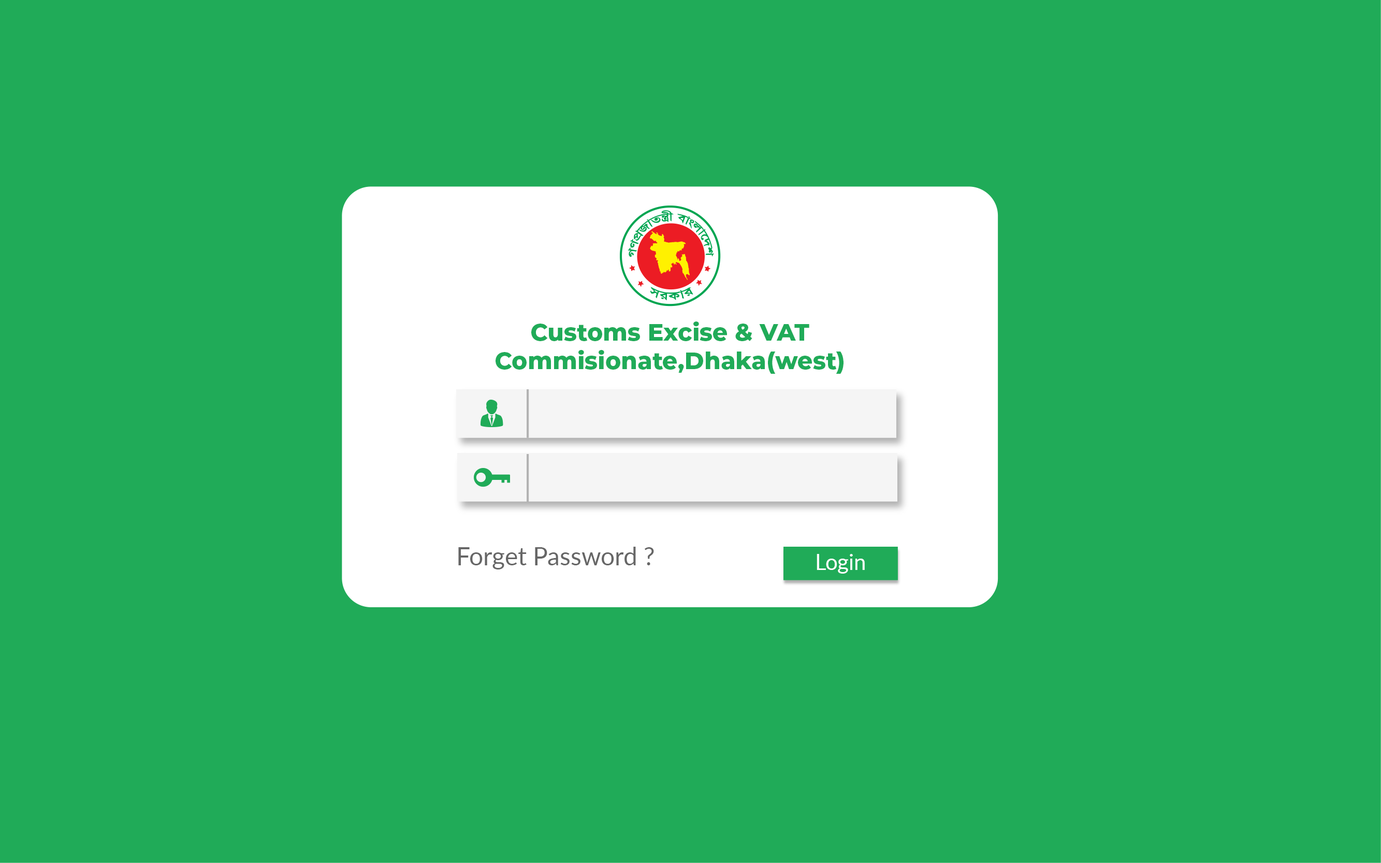
<style>
.page{position:relative;width:1381px;height:863px;background:#20ab58}
.page>*{position:absolute;margin:0}
.t1{font:23.7px "Montserrat-ExtraBold";color:#20ab58}
.t2{font:24.8px "Lato-Regular";color:#666666}
.t3{font:21.6px "Lato-Regular";color:#ffffff}
</style>
<div class="page">
<p class="t1" style="left:496px;top:322px;width:348px;height:52px;text-align:center">Customs Excise &amp; VAT<br>Commisionate,Dhaka(west)</p>
<p class="t2" style="left:458px;top:547px;width:196px;height:23px">Forget Password ?</p>
<p class="t3" style="left:817px;top:554px;width:48px;height:20px">Login</p>
</div>
